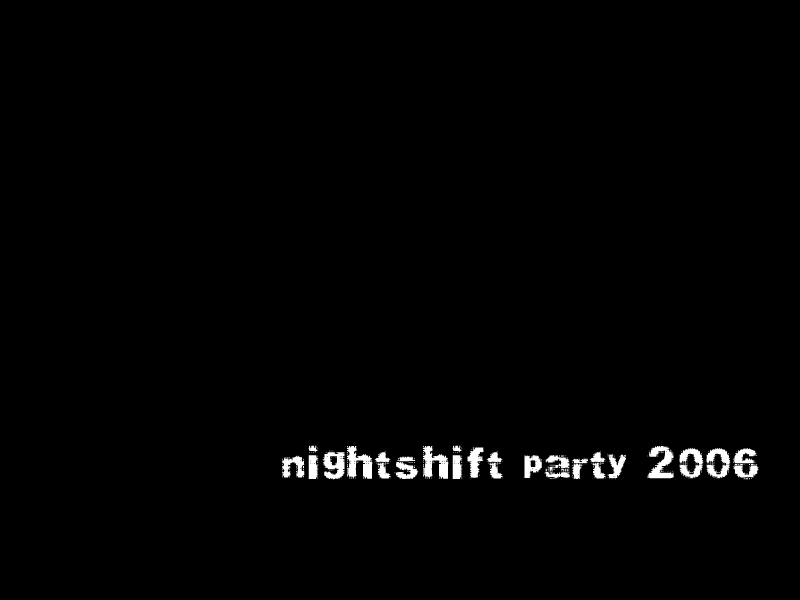
<style>
.page{position:relative;width:800px;height:600px;background:#000000}
.page>*{position:absolute;margin:0}
.t1{font:36px "Prefix";color:#ffffff}
</style>
<div class="page">
<p class="t1" style="left:282px;top:445px;width:477px;height:35px">nightshift party 2006</p>
</div>
